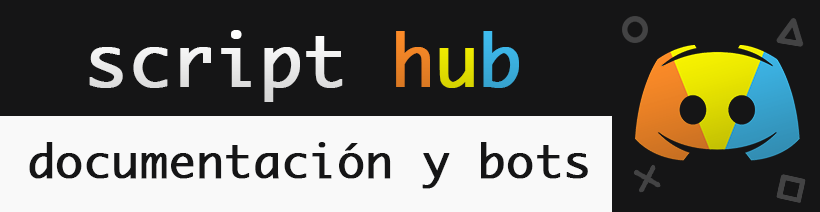
<style>
.page{position:relative;width:820px;height:212px;background:#151516}
.page>*{position:absolute;margin:0}
.t1{font:70px "Monaco";color:#ffffff;font-weight:bold}
.t2{font:70px "Monaco";color:#fc8b28;font-weight:bold}
.t3{font:70px "Monaco";color:#f8f400;font-weight:bold}
.t4{font:70px "Monaco";color:#3fbcef;font-weight:bold}
.t5{font:45px "Monaco";color:#151516;font-weight:bold}
</style>
<div class="page">
<p class="t1" style="left:89px;top:30px;width:430px;height:72px">script <span class="t2">h</span><span class="t3">u</span><span class="t4">b</span></p>
<p class="t5" style="left:29px;top:142px;width:559px;height:47px">documentación y bots</p>
</div>
